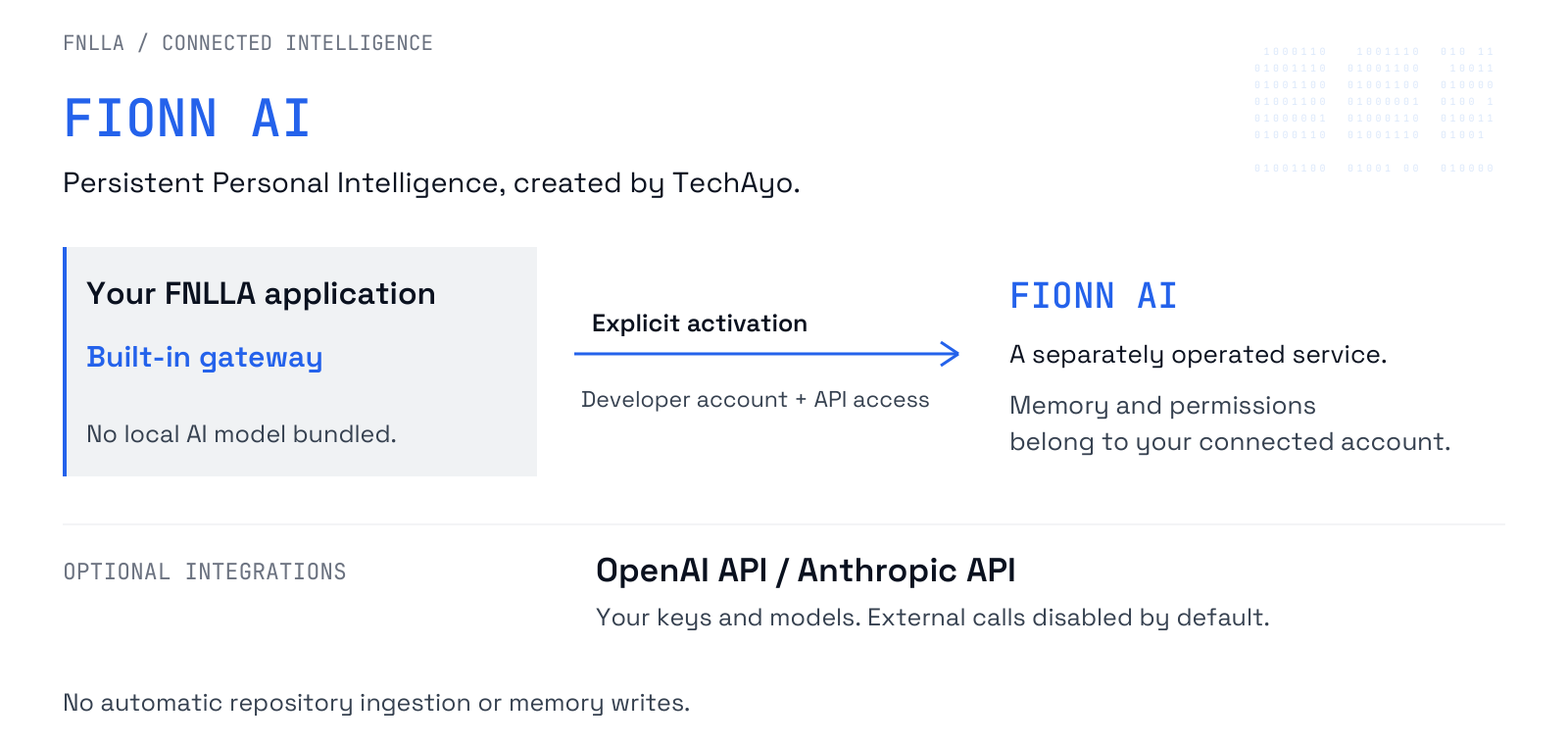
<style>
.page{position:relative;width:1568px;height:745px;background:#ffffff}
.page>*{position:absolute;margin:0}
.t1{font:20.6px "JetBrainsMono-Regular";color:#6b7280}
.t2{font:51.9px "JetBrainsMono-SemiBold";color:#2563eb}
.t3{font:28.4px "SpaceGrotesk-Regular";color:#0b1220}
.t4{font:35.3px "JetBrainsMono-SemiBold";color:#2563eb}
.t5{font:31.4px "SpaceGrotesk-SemiBold";color:#0b1220}
.t6{font:24.5px "SpaceGrotesk-SemiBold";color:#0b1220}
.t7{font:29.4px "SpaceGrotesk-SemiBold";color:#2563eb}
.t8{font:25.5px "SpaceGrotesk-Regular";color:#0b1220}
.t9{font:22.5px "SpaceGrotesk-Regular";color:#374151}
.t10{font:25.5px "SpaceGrotesk-Regular";color:#374151}
.t11{font:24.5px "SpaceGrotesk-Regular";color:#374151}
.t12{font:33.3px "SpaceGrotesk-SemiBold";color:#0b1220}
.t13{font:22.5px "JetBrainsMono-Regular";color:#6b7280}
</style>
<div class="page">
<p class="t1" style="left:61px;top:26px;width:375px;height:33px">FNLLA / CONNECTED INTELLIGENCE</p>
<p class="t2" style="left:61px;top:80px;width:254px;height:74px">FIONN AI</p>
<p class="t3" style="left:61px;top:162px;width:742px;height:41px">Persistent Personal Intelligence, created by TechAyo.</p>
<p class="t4" style="left:1007px;top:270px;width:174px;height:50px">FIONN AI</p>
<p class="t5" style="left:84px;top:270px;width:355px;height:46px">Your FNLLA application</p>
<p class="t6" style="left:590px;top:305px;width:220px;height:36px">Explicit activation</p>
<p class="t7" style="left:84px;top:335px;width:241px;height:42px">Built-in gateway</p>
<p class="t8" style="left:1007px;top:335px;width:383px;height:37px">A separately operated service.</p>
<p class="t9" style="left:579px;top:382px;width:353px;height:34px">Developer account + API access</p>
<p class="t10" style="left:1007px;top:386px;width:312px;height:37px">Memory and permissions</p>
<p class="t11" style="left:84px;top:416px;width:315px;height:36px">No local AI model bundled.</p>
<p class="t10" style="left:1007px;top:422px;width:446px;height:38px">belong to your connected account.</p>
<p class="t12" style="left:594px;top:546px;width:424px;height:47px">OpenAI API / Anthropic API</p>
<p class="t13" style="left:61px;top:554px;width:288px;height:34px">OPTIONAL INTEGRATIONS</p>
<p class="t11" style="left:594px;top:599px;width:678px;height:36px">Your keys and models. External calls disabled by default.</p>
<p class="t11" style="left:61px;top:684px;width:632px;height:36px">No automatic repository ingestion or memory writes.</p>
</div>
